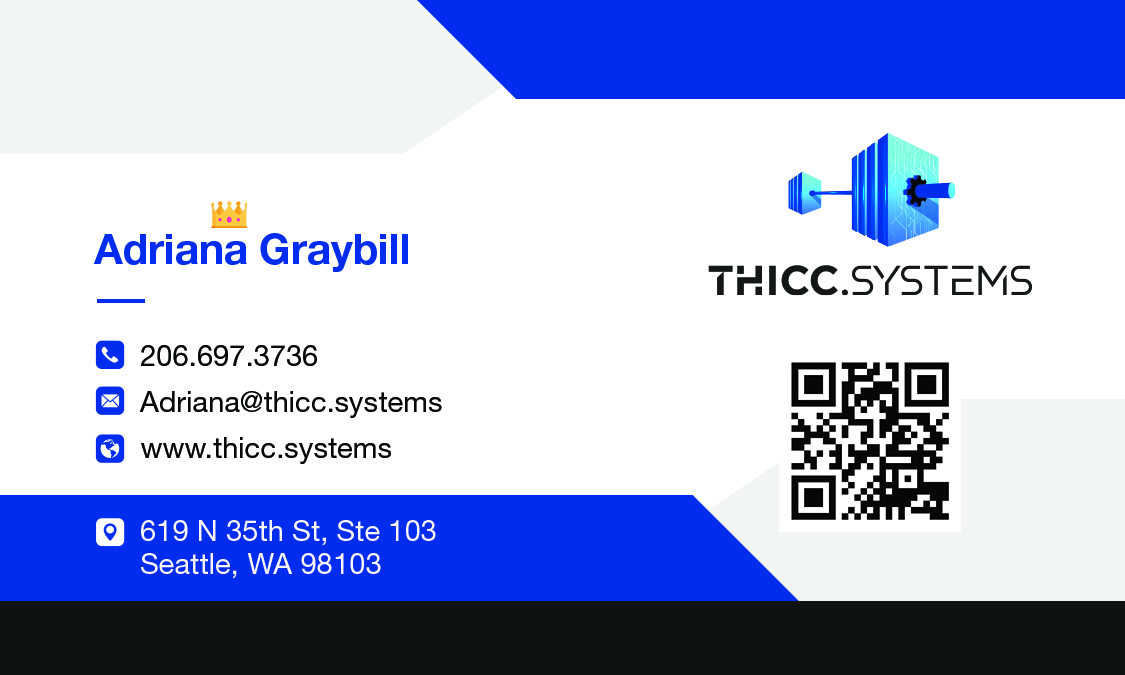
<style>
.page{position:relative;width:1125px;height:675px;background:#ffffff}
.page>*{position:absolute;margin:0}
.t1{font:41.7px "HelveticaNeueLTStd-Bd";color:#002cef}
.t2{font:29.2px/45.8px "HelveticaNeueLTStd-Roman";color:#060808}
.t3{font:29.2px/33.3px "HelveticaNeueLTStd-Roman";color:#f9f5f8}
</style>
<div class="page">
<p class="t1" style="left:93px;top:233px;width:315px;height:39px">Adriana Graybill</p>
<p class="t2" style="left:139px;top:345px;width:303px;height:119px">206.697.3736<br>Adriana@thicc.systems<br>www.thicc.systems</p>
<p class="t3" style="left:141px;top:520px;width:295px;height:59px">619 N 35th St, Ste 103<br>Seattle, WA 98103</p>
</div>
